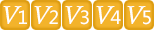
<style>
.page{position:relative;width:156px;height:30px;background:#f3b32b}
.page>*{position:absolute;margin:0}
.t1{font:24px "BernhardModernBT-Italic";color:#ffffff;font-weight:bold}
.t2{font:18px "MicrosoftYaHei";color:#ffffff}
</style>
<div class="page">
<p class="t1" style="left:3px;top:6px;width:19px;height:18px">V</p>
<p class="t1" style="left:34px;top:6px;width:19px;height:18px">V</p>
<p class="t1" style="left:65px;top:6px;width:19px;height:18px">V</p>
<p class="t1" style="left:96px;top:6px;width:19px;height:18px">V</p>
<p class="t1" style="left:127px;top:6px;width:19px;height:18px">V</p>
<p class="t2" style="left:19px;top:10px;width:8px;height:14px">1</p>
<p class="t2" style="left:49px;top:10px;width:9px;height:14px">2</p>
<p class="t2" style="left:80px;top:10px;width:9px;height:15px">3</p>
<p class="t2" style="left:110px;top:10px;width:11px;height:14px">4</p>
<p class="t2" style="left:143px;top:10px;width:8px;height:15px">5</p>
</div>
